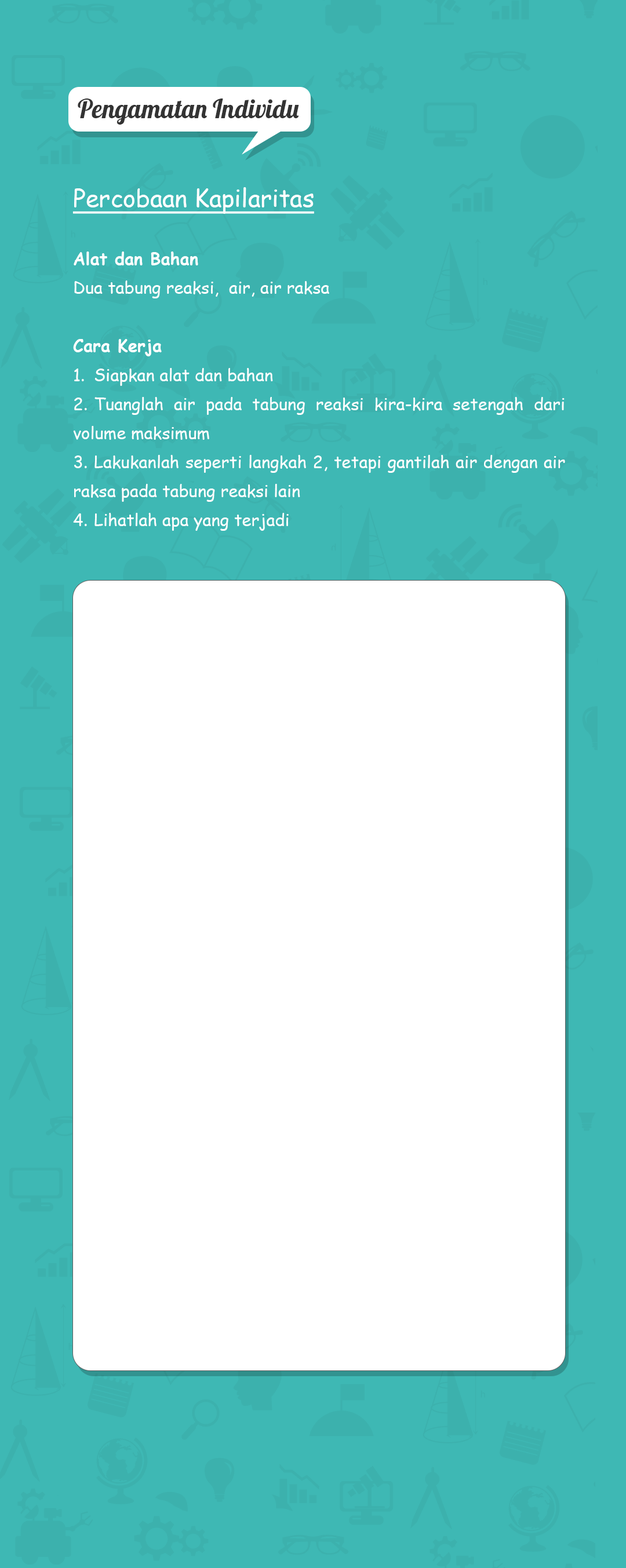
<style>
.page{position:relative;width:626px;height:1568px;background:#3eb8b4}
.page>*{position:absolute;margin:0}
.t1{font:25.8px "Lobster-Regular";color:#333333}
.t2{font:16.9px/29px "ComicSansMS";color:#ffffff}
.t3{font:24.2px/29px "ComicSansMS";color:#ffffff;text-decoration:underline}
.t4{font:16.9px/29px "ComicSansMS-Bold";color:#ffffff}
</style>
<div class="page">
<p class="t1" style="left:78px;top:99px;width:221px;height:26px">Pengamatan Individu</p>
<p class="t2" style="left:72px;top:187px;width:493px;height:344px;text-align:justify"><span class="t3">Percobaan Kapilaritas<br><br></span><span class="t4">Alat dan Bahan <br></span>Dua tabung reaksi,  air, air raksa<br><br><span class="t4">Cara Kerja<br></span>1. Siapkan alat dan bahan <br>2. Tuanglah air pada tabung reaksi kira-kira setengah dari volume maksimum<br>3. Lakukanlah seperti langkah 2, tetapi gantilah air dengan air raksa pada tabung reaksi lain <br>4. Lihatlah apa yang terjadi</p>
</div>
